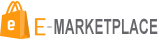
<style>
.page{position:relative;width:158px;height:39px;background:#ffffff}
.page>*{position:absolute;margin:0}
.t1{font:20.8px "Arial-BoldMT";color:#67666a;scale:0.66 1}
</style>
<div class="page">
<p class="t1" style="left:54px;top:18px;width:104px;height:16px">MARKETPLACE</p>
</div>
